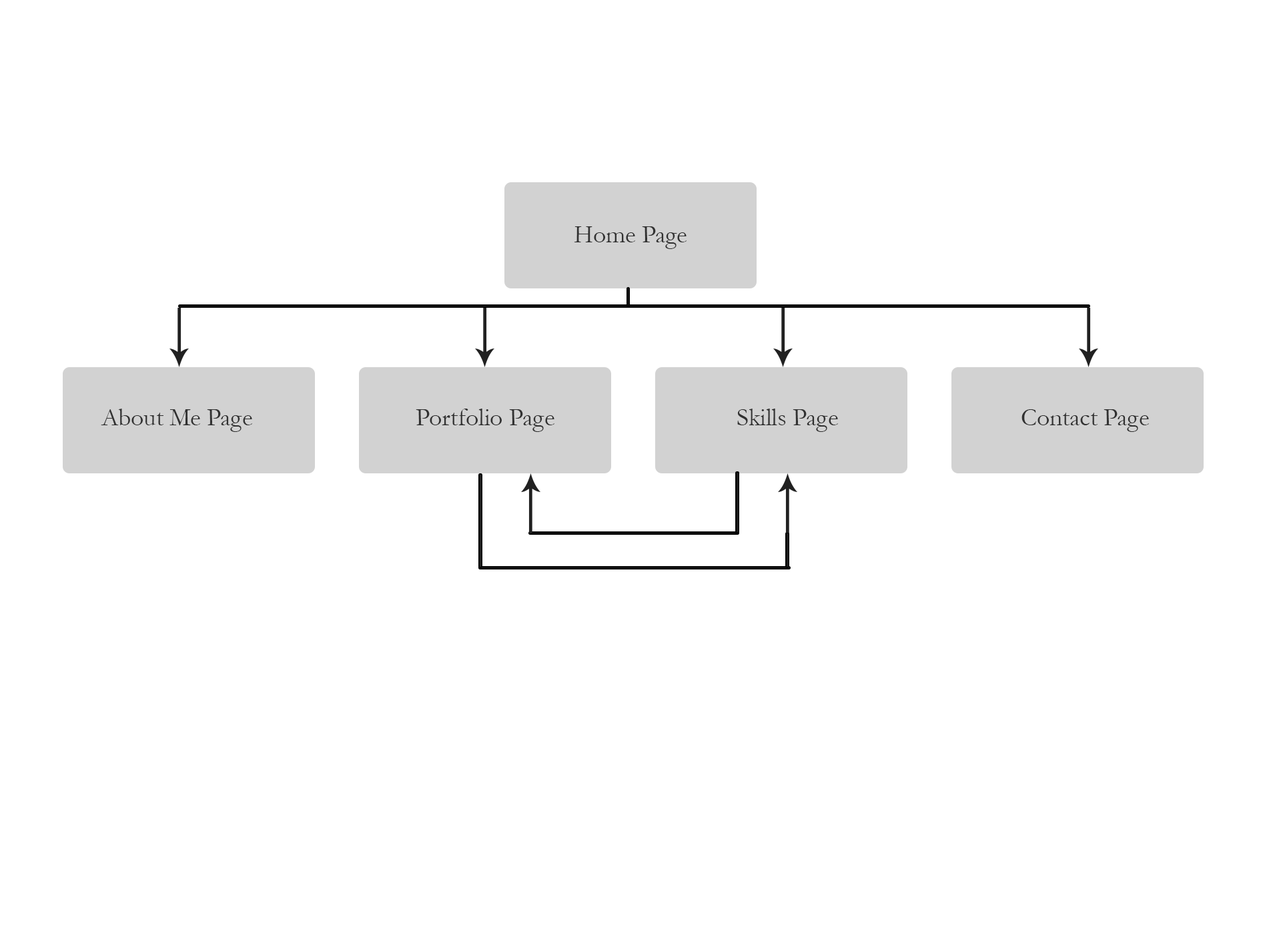
<style>
.page{position:relative;width:1261px;height:946px;background:#ffffff}
.page>*{position:absolute;margin:0}
.t1{font:25.1px "Garamond";color:#313131}
</style>
<div class="page">
<p class="t1" style="left:574px;top:226px;width:113px;height:23px">Home Page</p>
<p class="t1" style="left:101px;top:408px;width:151px;height:24px">About Me Page</p>
<p class="t1" style="left:416px;top:408px;width:139px;height:24px">Portfolio Page</p>
<p class="t1" style="left:737px;top:408px;width:101px;height:24px">Skills Page</p>
<p class="t1" style="left:1022px;top:409px;width:127px;height:23px">Contact Page</p>
</div>
